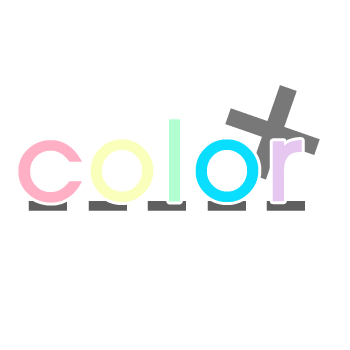
<style>
.page{position:relative;width:350px;height:350px;background:#ffffff}
.page>*{position:absolute;margin:0}
.t1{font:249.9px "HYnamM";color:#787878}
.t2{font:130px "HYnamB";color:#ffb0c5}
.t3{font:130px "HYnamB";color:#faffbc}
.t4{font:130px "HYnamB";color:#b2ffd1}
.t5{font:130px "HYnamB";color:#0adeff}
.t6{font:130px "HYnamB";color:#e6c7f0}
.t7{font:120px "HYnamB";color:#5f5f5f}
</style>
<div class="page">
<p class="t1" style="left:225px;top:85px;width:95px;height:95px;rotate:19deg">+</p>
<p class="t2" style="left:18px;top:119px;width:284px;height:84px">c<span class="t3">o</span><span class="t4">l</span><span class="t5">o</span><span class="t6">r</span></p>
<p class="t7" style="left:28px;top:201px;width:277px;height:10px">-----</p>
</div>
